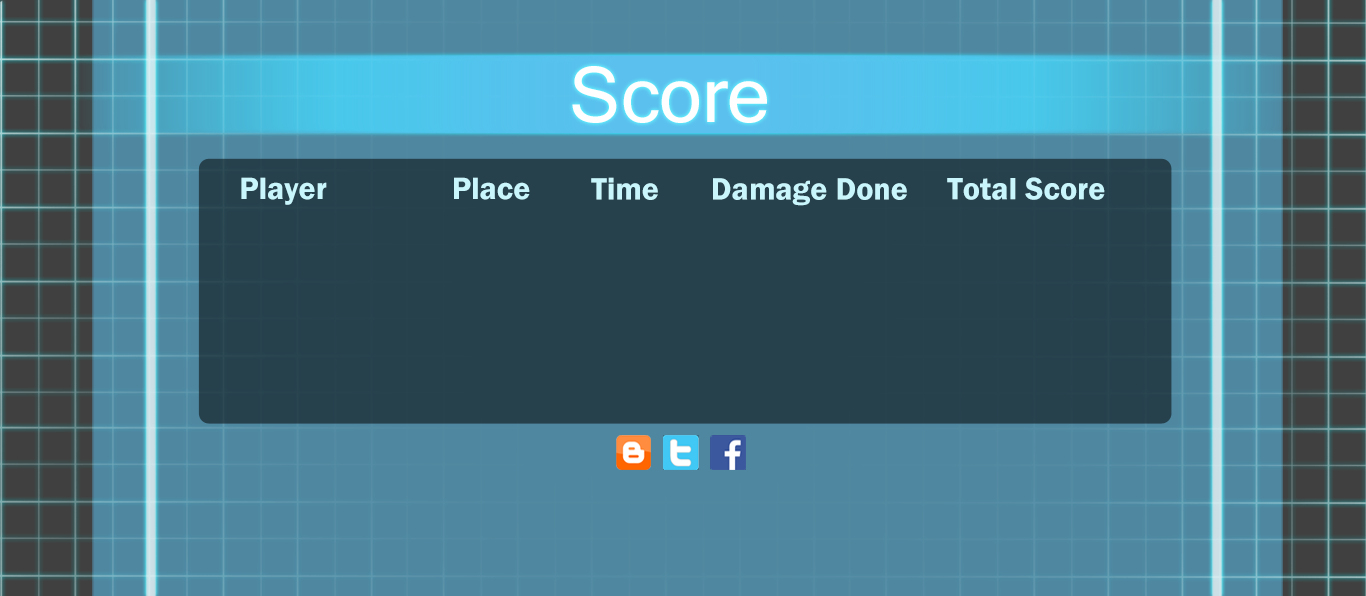
<style>
.page{position:relative;width:1366px;height:596px;background:#4f86a0}
.page>*{position:absolute;margin:0}
.t1{font:85.3px "Raavi";color:#fffefe}
.t2{font:32px "FranklinGothic-Demi";color:#c9f6fd}
</style>
<div class="page">
<p class="t1" style="left:572px;top:66px;width:195px;height:57px">Score</p>
<p class="t2" style="left:241px;top:177px;width:86px;height:28px">Player</p>
<p class="t2" style="left:454px;top:177px;width:76px;height:23px">Place</p>
<p class="t2" style="left:591px;top:177px;width:67px;height:23px">Time</p>
<p class="t2" style="left:713px;top:178px;width:194px;height:28px">Damage Done</p>
<p class="t2" style="left:947px;top:177px;width:158px;height:23px">Total Score</p>
</div>
